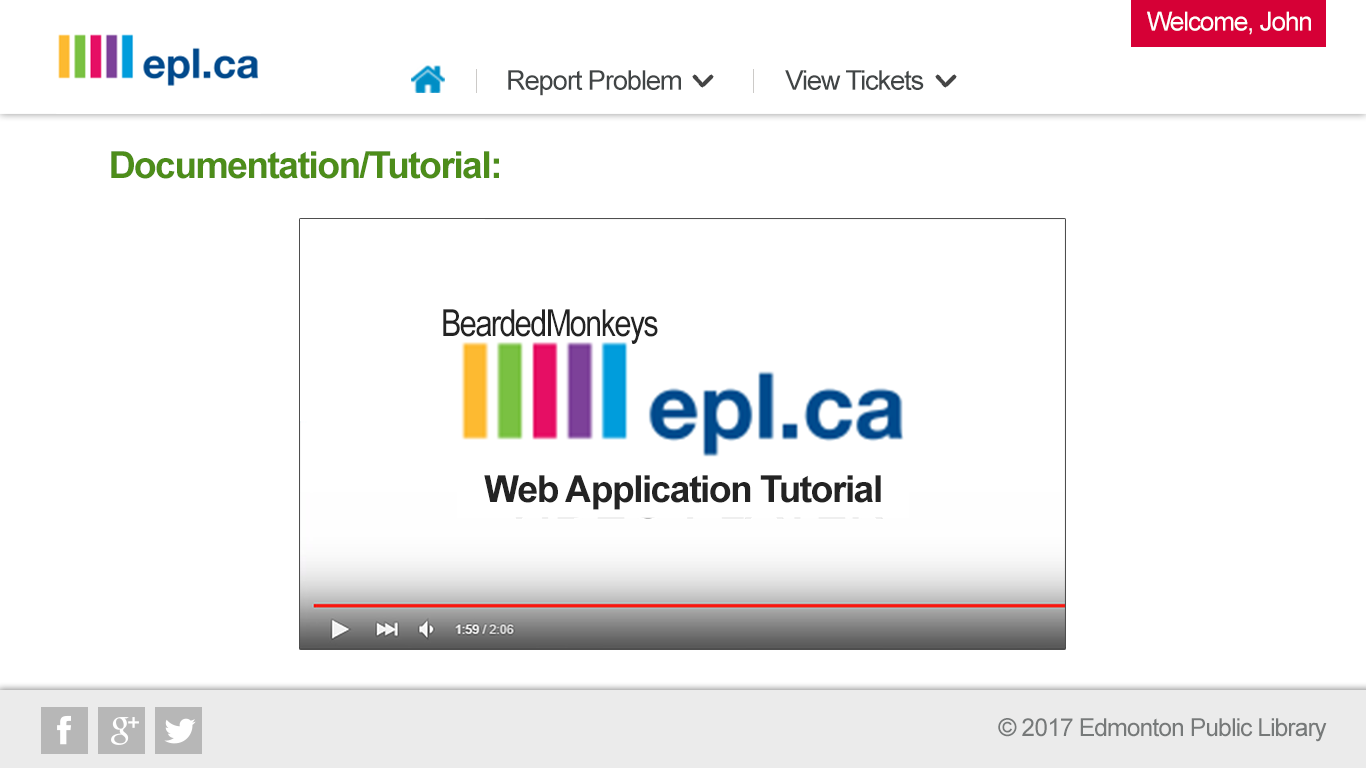
<style>
.page{position:relative;width:1366px;height:768px;background:#ffffff}
.page>*{position:absolute;margin:0}
.t1{font:26px "ArialMT";letter-spacing:-0.04em;color:#ffffff}
.t2{font:27.3px "ArialMT";letter-spacing:-0.04em;color:#414546}
.t3{font:37.2px "Arial-BoldMT";letter-spacing:-0.04em;color:#4d8d1a}
.t4{font:37.2px "ArialNarrow";letter-spacing:-0.04em;color:#232323}
.t5{font:37.2px "Arial-BoldMT";letter-spacing:-0.04em;color:#232323}
.t6{font:24.8px "ArialMT";letter-spacing:-0.04em;color:#767979}
</style>
<div class="page">
<p class="t1" style="left:1147px;top:11px;width:164px;height:24px">Welcome, John</p>
<p class="t2" style="left:508px;top:70px;width:173px;height:26px">Report Problem</p>
<p class="t2" style="left:785px;top:70px;width:139px;height:20px">View Tickets</p>
<p class="t3" style="left:111px;top:151px;width:388px;height:28px">Documentation/Tutorial:</p>
<p class="t4" style="left:443px;top:309px;width:215px;height:35px">BeardedMonkeys</p>
<p class="t5" style="left:484px;top:475px;width:397px;height:35px">Web Application Tutorial</p>
<p class="t6" style="left:998px;top:718px;width:329px;height:24px">© 2017 Edmonton Public Library</p>
</div>
